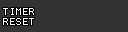
<style>
.page{position:relative;width:128px;height:32px;background:#333333}
.page>*{position:absolute;margin:0}
.t1{font:8px/10px "Terminal";letter-spacing:0.2em;color:#ffffff}
</style>
<div class="page">
<p class="t1" style="left:3px;top:8px;width:31px;height:17px;text-align:center">TIMER<br>RESET</p>
</div>
